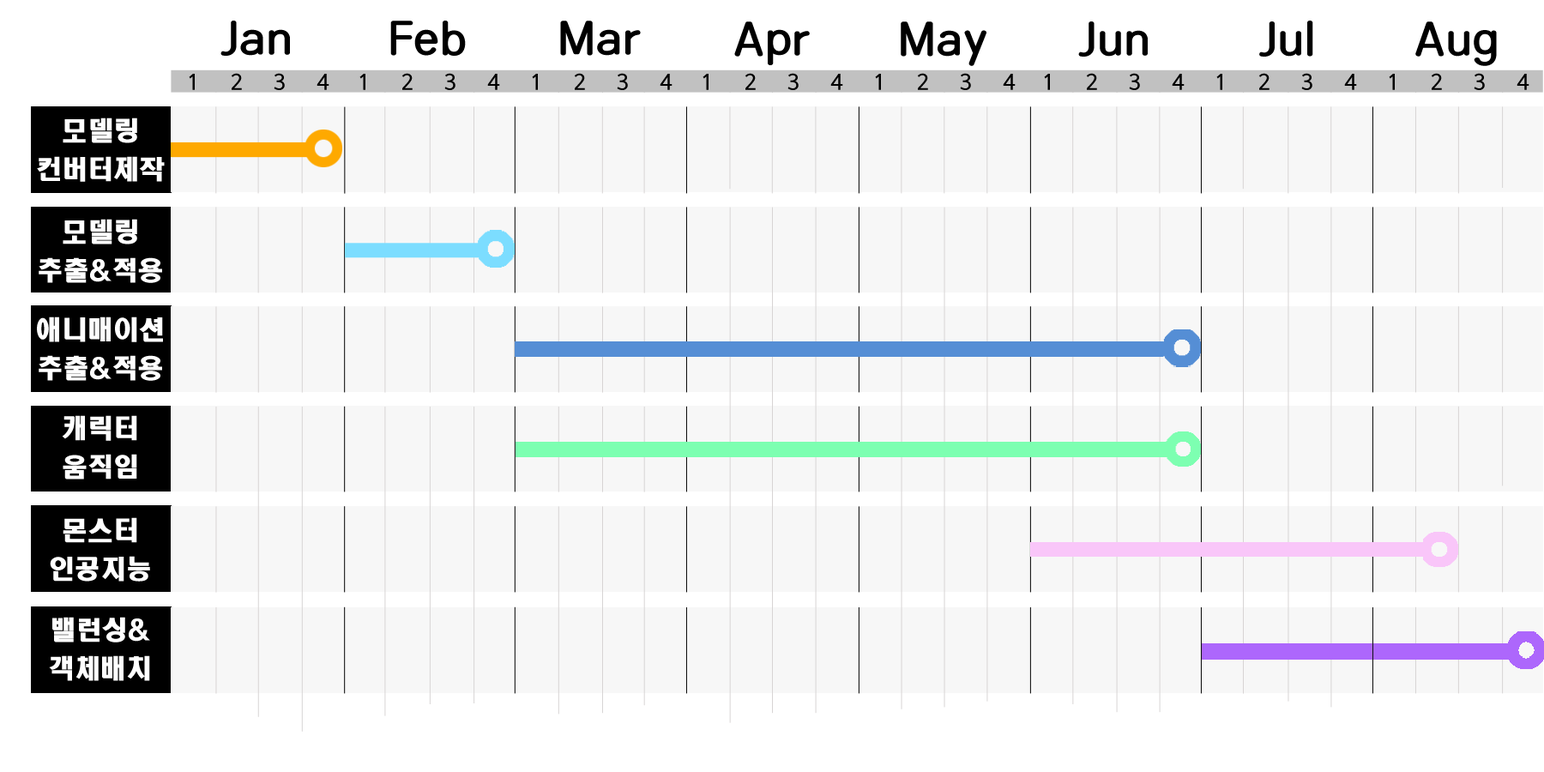
<style>
.page{position:relative;width:1544px;height:772px;background:#f7f7f7}
.page>*{position:absolute;margin:0}
.t1{font:51.5px "DXMgoRB-KSCpc-EUC-H";color:#000000}
.t2{font:20.6px "HaanYoonGothic760";color:#000000}
.t3{font:25.7px/38.6px "HeadlineR-HM";color:#ffffff}
</style>
<div class="page">
<p class="t1" style="left:220px;top:21px;width:70px;height:35px">Jan</p>
<p class="t1" style="left:390px;top:21px;width:76px;height:35px">Feb</p>
<p class="t1" style="left:560px;top:21px;width:81px;height:35px">Mar</p>
<p class="t1" style="left:734px;top:21px;width:76px;height:44px">Apr</p>
<p class="t1" style="left:901px;top:21px;width:86px;height:45px">May</p>
<p class="t1" style="left:1078px;top:21px;width:70px;height:36px">Jun</p>
<p class="t1" style="left:1259px;top:21px;width:55px;height:36px">Jul</p>
<p class="t1" style="left:1416px;top:21px;width:81px;height:45px">Aug</p>
<p class="t2" style="left:189px;top:74px;width:6px;height:16px">1</p>
<p class="t2" style="left:231px;top:73px;width:11px;height:17px">2</p>
<p class="t2" style="left:274px;top:73px;width:11px;height:17px">3</p>
<p class="t2" style="left:317px;top:74px;width:12px;height:16px">4</p>
<p class="t2" style="left:359px;top:74px;width:6px;height:16px">1</p>
<p class="t2" style="left:402px;top:73px;width:11px;height:17px">2</p>
<p class="t2" style="left:444px;top:73px;width:12px;height:17px">3</p>
<p class="t2" style="left:487px;top:74px;width:13px;height:16px">4</p>
<p class="t2" style="left:532px;top:74px;width:6px;height:16px">1</p>
<p class="t2" style="left:574px;top:73px;width:11px;height:17px">2</p>
<p class="t2" style="left:617px;top:73px;width:11px;height:17px">3</p>
<p class="t2" style="left:660px;top:74px;width:13px;height:16px">4</p>
<p class="t2" style="left:703px;top:74px;width:6px;height:16px">1</p>
<p class="t2" style="left:745px;top:73px;width:11px;height:17px">2</p>
<p class="t2" style="left:788px;top:73px;width:11px;height:17px">3</p>
<p class="t2" style="left:830px;top:74px;width:13px;height:16px">4</p>
<p class="t2" style="left:875px;top:74px;width:6px;height:16px">1</p>
<p class="t2" style="left:917px;top:73px;width:11px;height:17px">2</p>
<p class="t2" style="left:960px;top:73px;width:11px;height:17px">3</p>
<p class="t2" style="left:1003px;top:74px;width:13px;height:16px">4</p>
<p class="t2" style="left:1044px;top:74px;width:6px;height:16px">1</p>
<p class="t2" style="left:1086px;top:73px;width:11px;height:17px">2</p>
<p class="t2" style="left:1129px;top:73px;width:11px;height:17px">3</p>
<p class="t2" style="left:1172px;top:74px;width:13px;height:16px">4</p>
<p class="t2" style="left:1217px;top:74px;width:6px;height:16px">1</p>
<p class="t2" style="left:1259px;top:73px;width:11px;height:17px">2</p>
<p class="t2" style="left:1302px;top:73px;width:11px;height:17px">3</p>
<p class="t2" style="left:1344px;top:74px;width:13px;height:16px">4</p>
<p class="t2" style="left:1389px;top:74px;width:6px;height:16px">1</p>
<p class="t2" style="left:1431px;top:73px;width:11px;height:17px">2</p>
<p class="t2" style="left:1474px;top:73px;width:11px;height:17px">3</p>
<p class="t2" style="left:1517px;top:74px;width:13px;height:16px">4</p>
<p class="t3" style="left:37px;top:118px;width:128px;height:64px;text-align:center">모델링<br>컨버터제작</p>
<p class="t3" style="left:39px;top:219px;width:123px;height:64px;text-align:center">모델링 추출&amp;적용</p>
<p class="t3" style="left:37px;top:317px;width:126px;height:64px;text-align:center">애니매이션<br>추출&amp;적용</p>
<p class="t3" style="left:62px;top:415px;width:75px;height:65px;text-align:center">캐릭터<br>움직임</p>
<p class="t3" style="left:50px;top:517px;width:100px;height:65px;text-align:center">몬스터<br>인공지능</p>
<p class="t3" style="left:49px;top:617px;width:101px;height:64px;text-align:center">밸런싱&amp;<br>객체배치</p>
</div>
